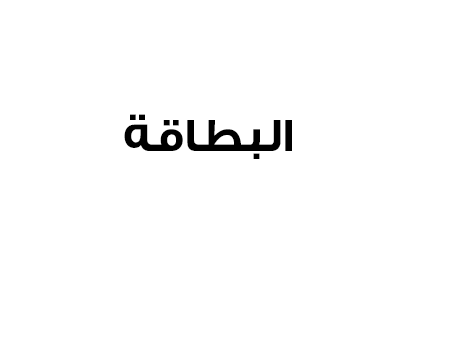
<style>
.page{position:relative;width:454px;height:340px;background:#ffffff}
.page>*{position:absolute;margin:0}
.t1{font:48px "GESSTwoBold-Bold";color:#000000}
</style>
<div class="page">
<p class="t1" style="left:124px;top:114px;width:168px;height:45px">البطاقة</p>
</div>
